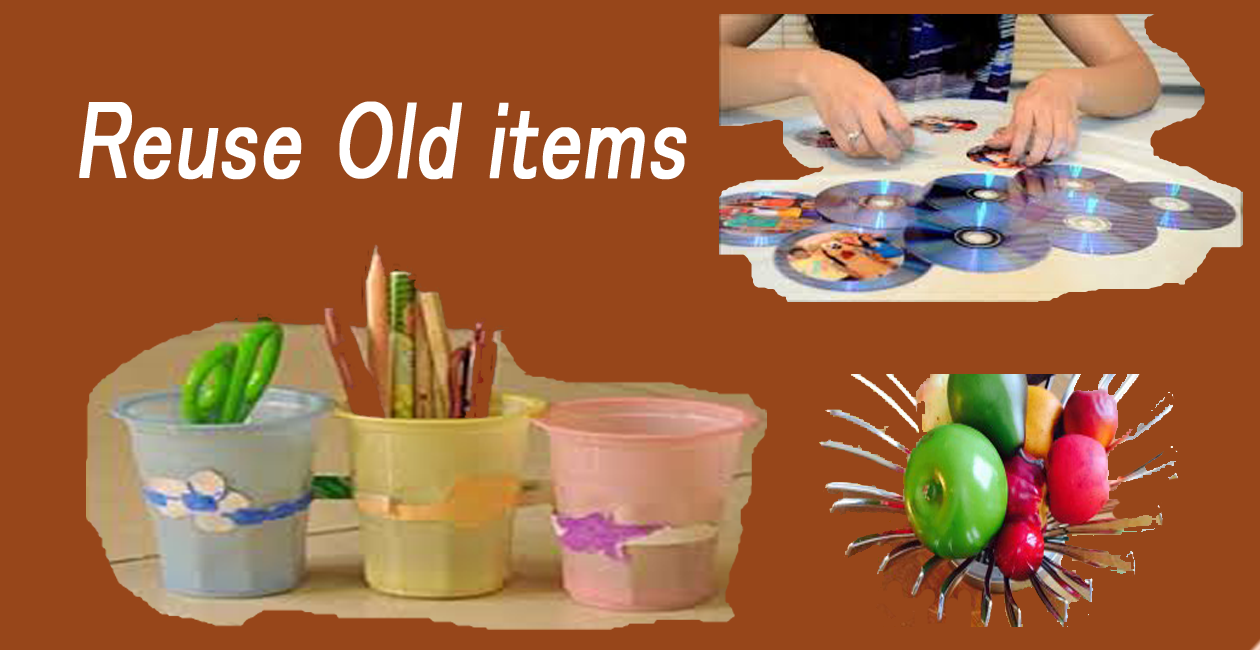
<style>
.page{position:relative;width:1260px;height:650px;background:#97461a}
.page>*{position:absolute;margin:0}
.t1{font:111.3px "MS-PGothic";color:#ffffff;font-weight:bold;font-style:italic;scale:0.76 1}
</style>
<div class="page">
<p class="t1" style="left:79px;top:101px;width:608px;height:79px">Reuse Old items</p>
</div>
